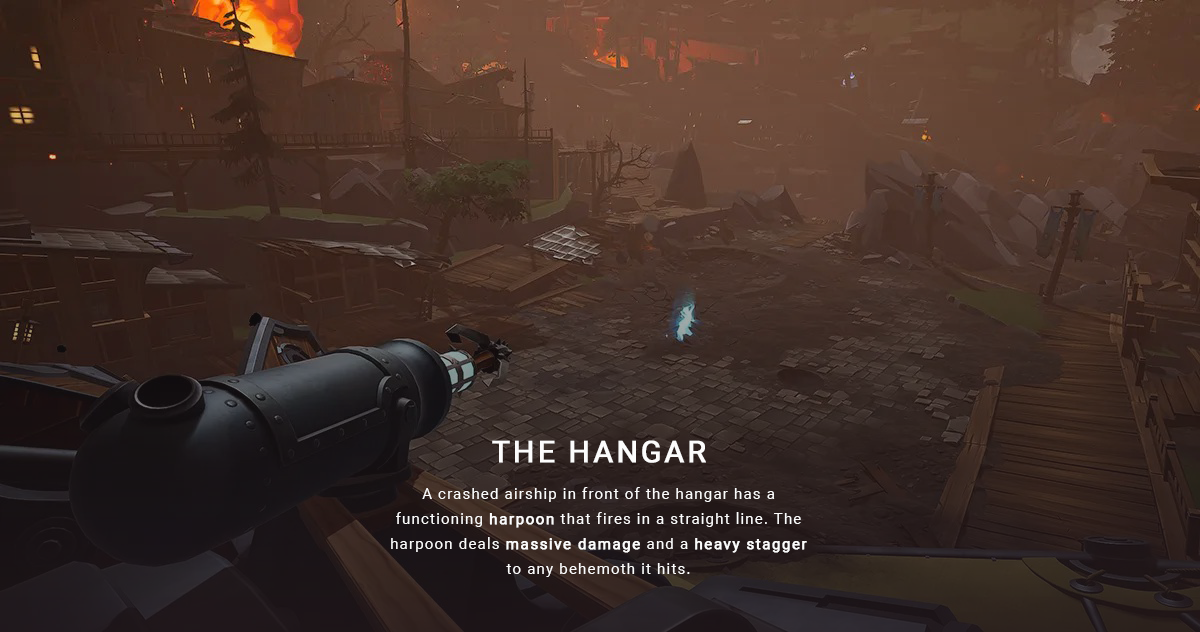
<style>
.page{position:relative;width:1200px;height:632px}
.page>*{position:absolute;margin:0}
.t1{font:30px "Roboto-Regular";letter-spacing:0.08em;color:#fcfcfc;text-transform:uppercase;font-weight:bold}
.t2{font:14.9px/24.9px "Roboto-Regular";letter-spacing:0.08em;color:#fcfcfc}
.t3{font:14.9px/24.9px "Roboto-Regular";letter-spacing:0.08em;color:#fcfcfc;font-weight:bold}
</style>
<div class="page">
<p class="t1" style="left:492px;top:440px;width:214px;height:23px">The Hangar</p>
<p class="t2" style="left:391px;top:487px;width:416px;height:90px;text-align:center">A crashed airship in front of the hangar has a functioning <span class="t3">harpoon</span> that fires in a straight line. The harpoon deals <span class="t3">massive damage</span> and a <span class="t3">heavy stagger </span>to any behemoth it hits.</p>
</div>
